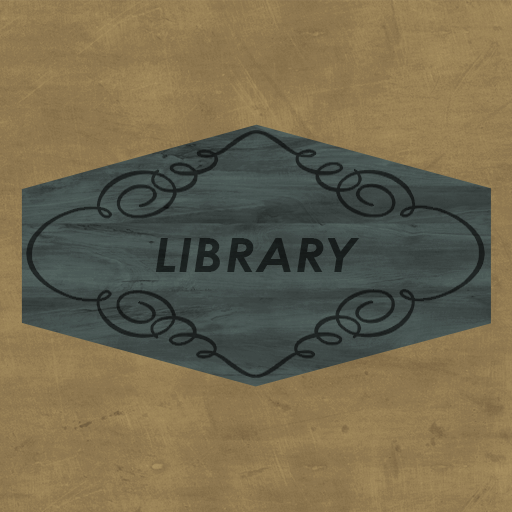
<style>
.page{position:relative;width:512px;height:512px}
.page>*{position:absolute;margin:0}
.t1{font:48px "CenturyGothic-BoldItalic";letter-spacing:0.025em;color:#191f1d;text-transform:uppercase;scale:1.07 1}
</style>
<div class="page">
<p class="t1" style="left:155px;top:238px;width:205px;height:34px">Library</p>
</div>
